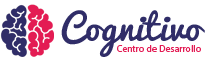
<style>
.page{position:relative;width:207px;height:60px;background:#ffffff}
.page>*{position:absolute;margin:0}
.t1{font:35.2px "Pacifico-Regular";letter-spacing:0.01em;color:#302d68}
.t2{font:9.4px "MyriadPro-Regular";letter-spacing:0.01em;color:#e41c54}
</style>
<div class="page">
<p class="t1" style="left:61px;top:10px;width:144px;height:47px">Cognitivo</p>
<p class="t2" style="left:117px;top:45px;width:84px;height:7px">Centro de Desarrollo</p>
</div>
